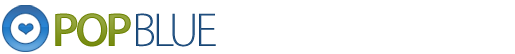
<style>
.page{position:relative;width:515px;height:54px;background:#ffffff}
.page>*{position:absolute;margin:0}
.t1{font:48px "MyriadPro-Semibold";letter-spacing:-0.075em}
.t2{font:48px "MyriadPro-Light";letter-spacing:-0.075em;color:#1f4e7f}
</style>
<div class="page">
<p class="t1" style="left:55px;top:13px;width:76px;height:34px">POP</p>
<p class="t2" style="left:136px;top:13px;width:80px;height:34px">BLUE</p>
</div>
